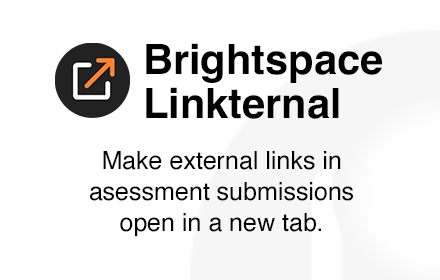
<style>
.page{position:relative;width:440px;height:280px;background:#ffffff}
.page>*{position:absolute;margin:0}
.t1{font:41.7px/43.8px "Helvetica-Bold";color:#000000}
.t2{font:25px/31.2px "Helvetica";color:#000000}
</style>
<div class="page">
<p class="t1" style="left:146px;top:43px;width:236px;height:76px">Brightspace<br>Linkternal</p>
<p class="t2" style="left:90px;top:151px;width:263px;height:86px;text-align:center">Make external links in asessment submissions<br>open in a new tab.</p>
</div>
